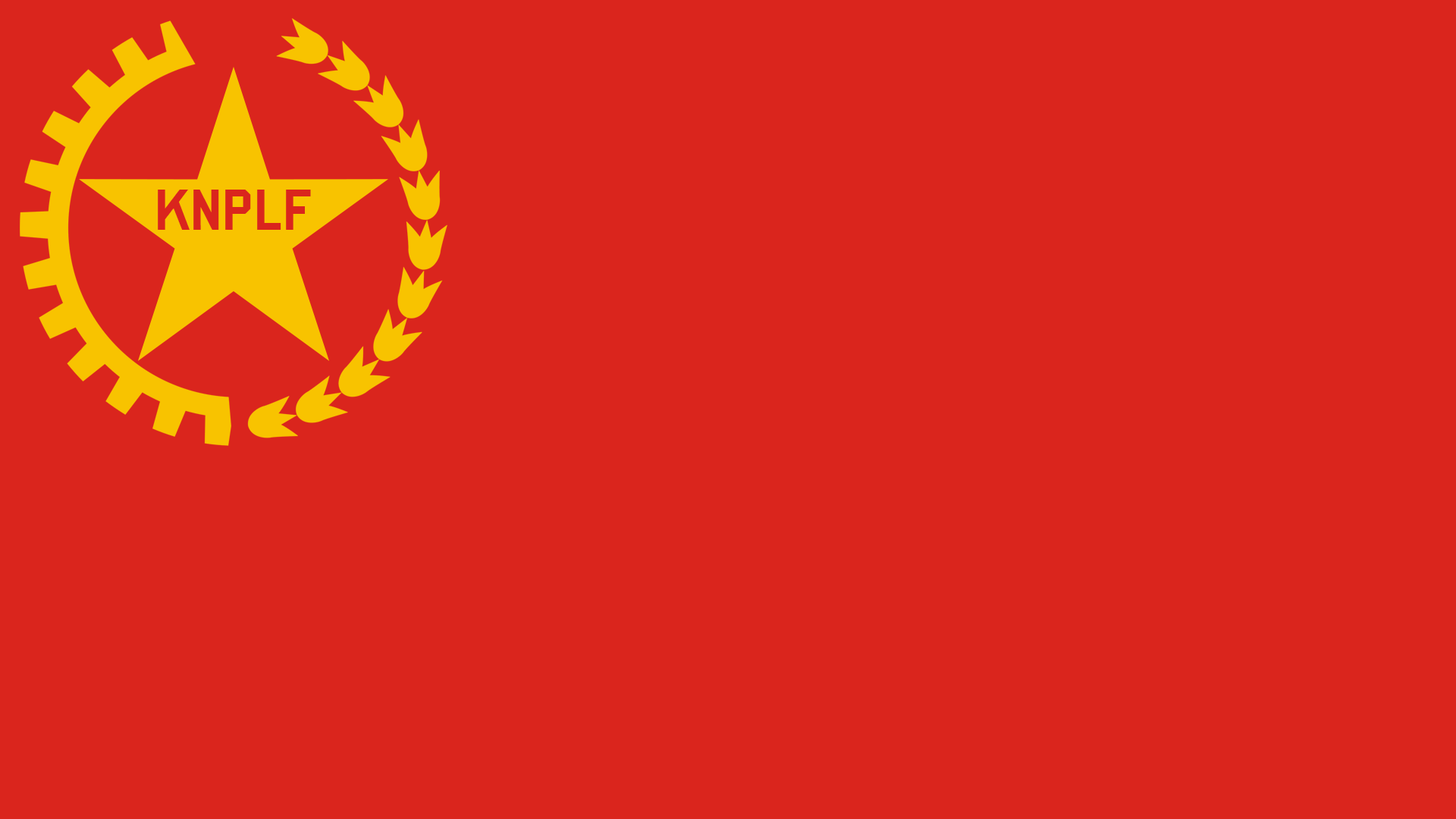
<style>
.page{position:relative;width:1456px;height:819px;background:#da251d}
.page>*{position:absolute;margin:0}
.t1{font:63.1px "Bombardier";letter-spacing:0.01em;color:#da251d}
</style>
<div class="page">
<p class="t1" style="left:158px;top:190px;width:153px;height:40px">KNPLF</p>
</div>
